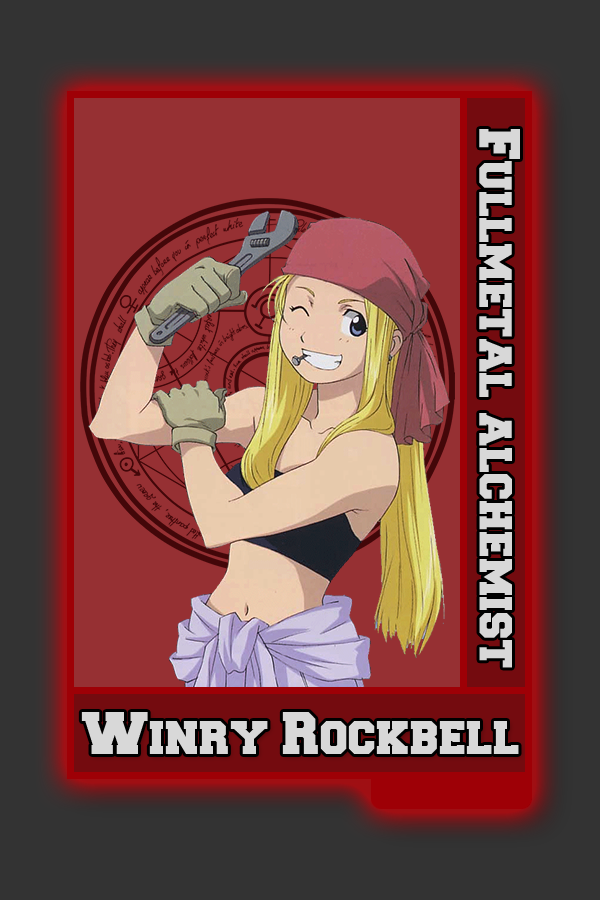
<style>
.page{position:relative;width:600px;height:900px;background:#333333}
.page>*{position:absolute;margin:0}
.t1{font:48.8px "Freshman";color:#d8d8d8}
.t2{font:50px "Freshman";color:#d8d8d8}
</style>
<div class="page">
<p class="t1" style="left:479px;top:129px;width:41px;height:539px;rotate:90deg">Fullmetal alchemist</p>
<p class="t2" style="left:81px;top:712px;width:438px;height:42px">Winry Rockbell</p>
</div>
